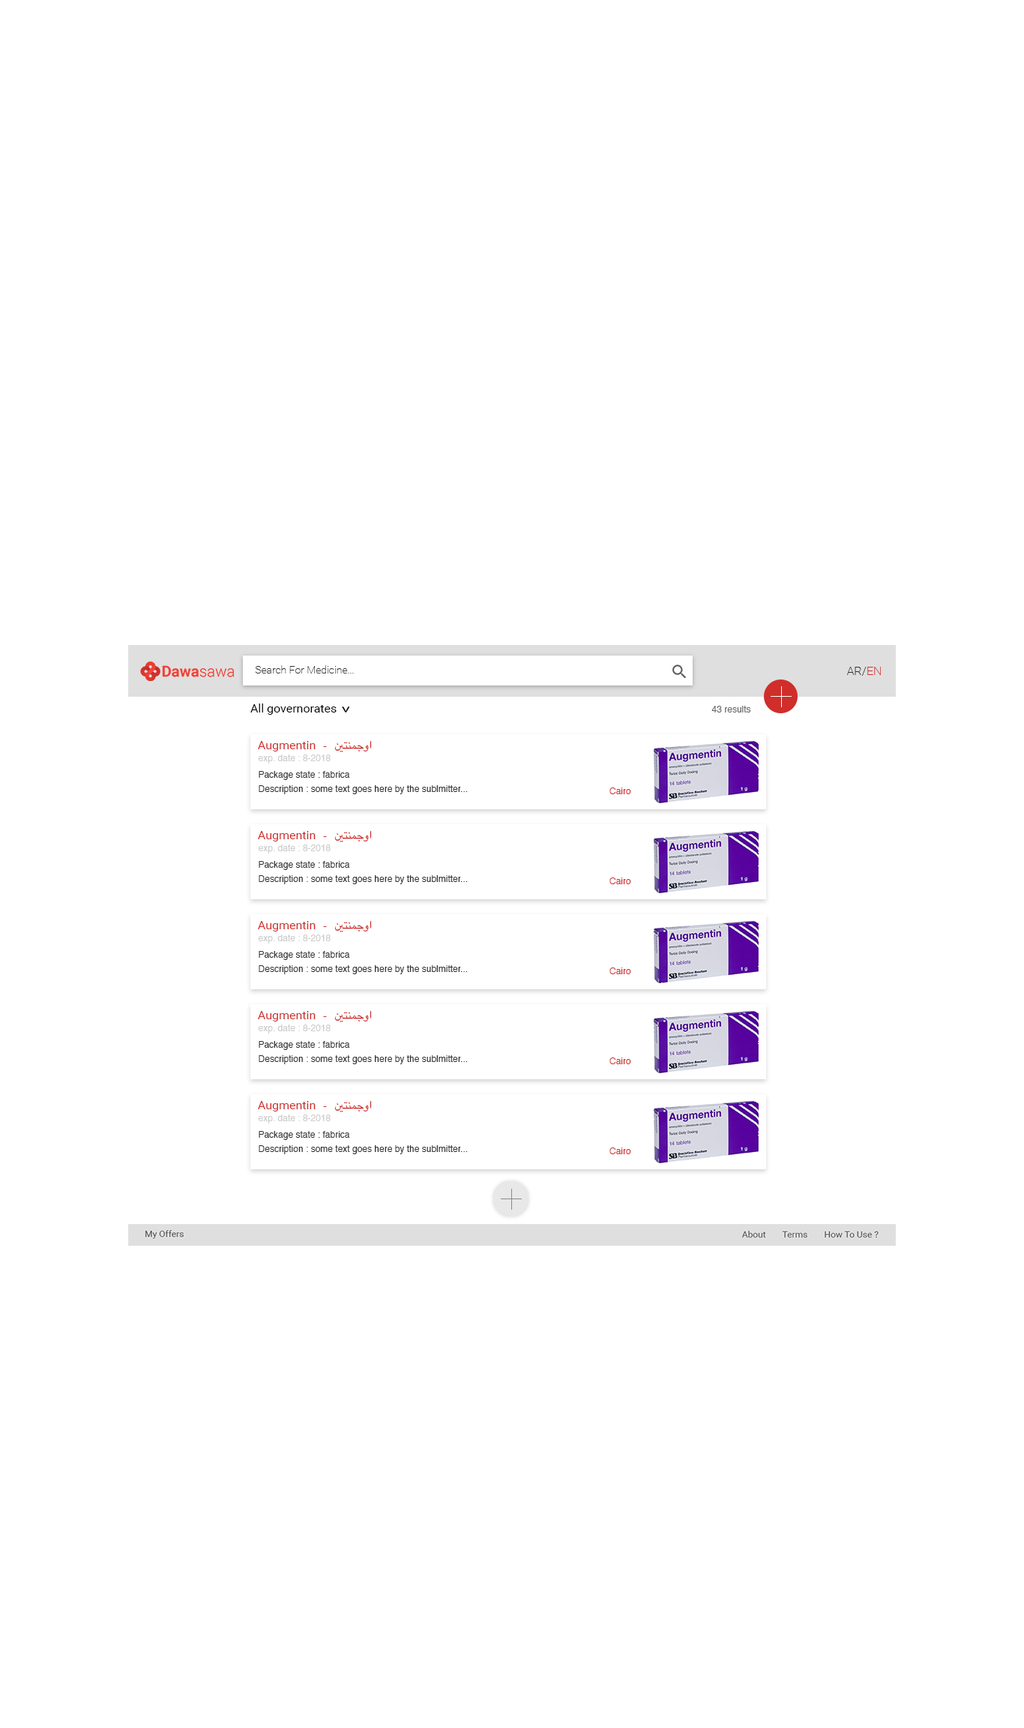
<style>
.page{position:relative;width:1024px;height:1728px;background:#ffffff}
.page>*{position:absolute;margin:0}
.t1{font:12px "Roboto-Regular";color:#000000}
.t2{font:18px "Roboto-Regular";color:#000000;scale:0.75 1}
.t3{font:9px "Helvetica";color:#666666}
.t4{font:12px "Roboto-Regular";color:#ce2d2b}
.t5{font:12px "GeezaPro";color:#ce2d2b}
.t6{font:9px "Helvetica";color:#cccccc}
.t7{font:9px "Helvetica";color:#333333}
.t8{font:9px "Helvetica";color:#cf2e2b}
</style>
<div class="page">
<p class="t1" style="left:250px;top:704px;width:87px;height:11px">All governorates</p>
<p class="t2" style="left:342px;top:706px;width:8px;height:6px;rotate:90deg">&gt;</p>
<p class="t3" style="left:712px;top:706px;width:40px;height:6px">43 results</p>
<p class="t4" style="left:258px;top:741px;width:58px;height:11px">Augmentin</p>
<p class="t4" style="left:323px;top:746px;width:4px;height:1px">-</p>
<p class="t5" style="left:334px;top:740px;width:38px;height:12px">اوجمنتين</p>
<p class="t6" style="left:258px;top:754px;width:73px;height:10px">exp. date : 8-2018</p>
<p class="t7" style="left:259px;top:771px;width:91px;height:9px">Package state : fabrica</p>
<p class="t7" style="left:259px;top:785px;width:209px;height:9px">Description : some text goes here by the sublmitter...</p>
<p class="t8" style="left:610px;top:788px;width:22px;height:6px">Cairo</p>
<p class="t4" style="left:258px;top:831px;width:58px;height:11px">Augmentin</p>
<p class="t5" style="left:334px;top:830px;width:38px;height:12px">اوجمنتين</p>
<p class="t6" style="left:258px;top:844px;width:73px;height:10px">exp. date : 8-2018</p>
<p class="t4" style="left:323px;top:836px;width:4px;height:1px">-</p>
<p class="t7" style="left:259px;top:861px;width:91px;height:9px">Package state : fabrica</p>
<p class="t7" style="left:259px;top:875px;width:209px;height:9px">Description : some text goes here by the sublmitter...</p>
<p class="t8" style="left:610px;top:878px;width:22px;height:6px">Cairo</p>
<p class="t4" style="left:258px;top:921px;width:58px;height:11px">Augmentin</p>
<p class="t4" style="left:323px;top:926px;width:4px;height:1px">-</p>
<p class="t5" style="left:334px;top:920px;width:38px;height:12px">اوجمنتين</p>
<p class="t6" style="left:258px;top:934px;width:73px;height:10px">exp. date : 8-2018</p>
<p class="t7" style="left:259px;top:951px;width:91px;height:9px">Package state : fabrica</p>
<p class="t7" style="left:259px;top:965px;width:209px;height:9px">Description : some text goes here by the sublmitter...</p>
<p class="t8" style="left:610px;top:968px;width:22px;height:6px">Cairo</p>
<p class="t4" style="left:258px;top:1011px;width:58px;height:11px">Augmentin</p>
<p class="t5" style="left:334px;top:1010px;width:38px;height:12px">اوجمنتين</p>
<p class="t6" style="left:258px;top:1024px;width:73px;height:10px">exp. date : 8-2018</p>
<p class="t4" style="left:323px;top:1016px;width:4px;height:1px">-</p>
<p class="t7" style="left:259px;top:1041px;width:91px;height:9px">Package state : fabrica</p>
<p class="t7" style="left:259px;top:1055px;width:209px;height:9px">Description : some text goes here by the sublmitter...</p>
<p class="t8" style="left:610px;top:1058px;width:22px;height:6px">Cairo</p>
<p class="t4" style="left:258px;top:1101px;width:58px;height:11px">Augmentin</p>
<p class="t4" style="left:323px;top:1106px;width:4px;height:1px">-</p>
<p class="t5" style="left:334px;top:1100px;width:38px;height:12px">اوجمنتين</p>
<p class="t6" style="left:258px;top:1114px;width:73px;height:10px">exp. date : 8-2018</p>
<p class="t7" style="left:259px;top:1131px;width:91px;height:9px">Package state : fabrica</p>
<p class="t7" style="left:259px;top:1145px;width:209px;height:9px">Description : some text goes here by the sublmitter...</p>
<p class="t8" style="left:610px;top:1148px;width:22px;height:6px">Cairo</p>
</div>
